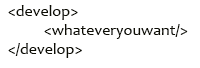
<style>
.page{position:relative;width:200px;height:68px;background:#ffffff}
.page>*{position:absolute;margin:0}
.t1{font:16px "Candara";color:#0d0d04}
</style>
<div class="page">
<p class="t1" style="left:8px;top:5px;width:180px;height:53px">&lt;develop&gt;<br> &lt;whateveryouwant/&gt;<br>&lt;/develop&gt;</p>
</div>
